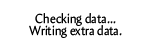
<style>
.page{position:relative;width:152px;height:50px;background:#ffffff}
.page>*{position:absolute;margin:0}
.t1{font:13.2px/12px "Amira-Roman";color:#000000;scale:0.91 1}
</style>
<div class="page">
<p class="t1" style="left:29px;top:13px;width:93px;height:25px;text-align:center">Checking data… <br>Writing extra data.</p>
</div>
